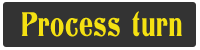
<style>
.page{position:relative;width:200px;height:50px;background:#333333}
.page>*{position:absolute;margin:0}
.t1{font:36px "Titania";letter-spacing:0.025em;color:#f4e112;scale:0.7 1}
</style>
<div class="page">
<p class="t1" style="left:21px;top:11px;width:161px;height:26px">Process turn</p>
</div>
